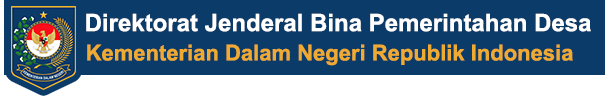
<style>
.page{position:relative;width:605px;height:99px;background:#0b3b68}
.page>*{position:absolute;margin:0}
.t1{font:24px "Arial-BoldMT";color:#ffffff}
.t2{font:22px "Arial-BoldMT";color:#efaa32}
</style>
<div class="page">
<p class="t1" style="left:86px;top:13px;width:505px;height:19px">Direktorat Jenderal Bina Pemerintahan Desa</p>
<p class="t2" style="left:87px;top:44px;width:486px;height:22px">Kementerian Dalam Negeri Republik Indonesia</p>
</div>
